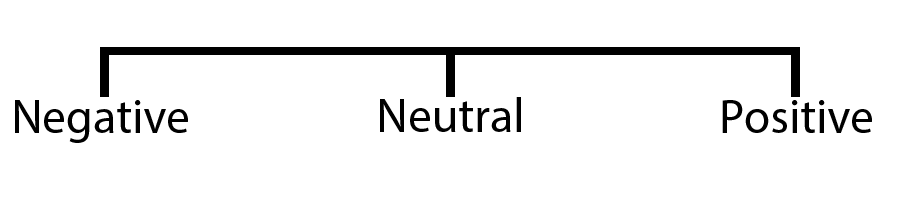
<style>
.page{position:relative;width:900px;height:200px;background:#ffffff}
.page>*{position:absolute;margin:0}
.t1{font:48px "MyriadPro-Regular";color:#000000}
</style>
<div class="page">
<p class="t1" style="left:15px;top:100px;width:173px;height:43px">Negative</p>
<p class="t1" style="left:380px;top:97px;width:141px;height:35px">Neutral</p>
<p class="t1" style="left:722px;top:100px;width:150px;height:33px">Positive</p>
</div>
